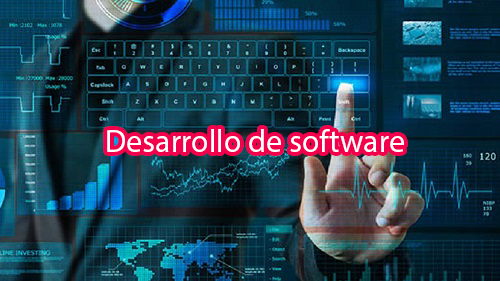
<style>
.page{position:relative;width:500px;height:281px}
.page>*{position:absolute;margin:0}
.t1{font:32px "MyriadPro-Regular";color:#ffffff}
</style>
<div class="page">
<p class="t1" style="left:107px;top:129px;width:297px;height:23px">Desarrollo de software</p>
</div>
